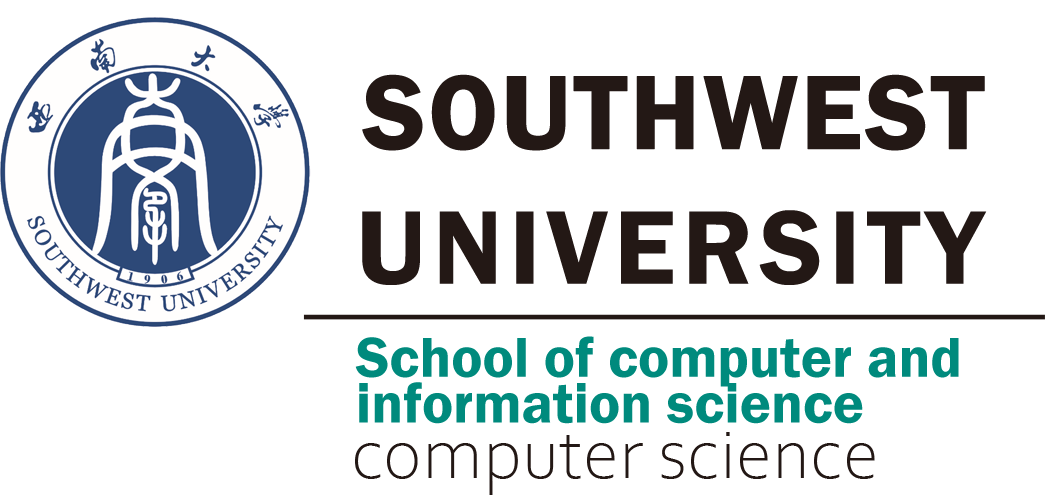
<style>
.page{position:relative;width:1046px;height:496px;background:#ffffff}
.page>*{position:absolute;margin:0}
.t1{font:108.4px "FranklinGothic-Demi";color:#231815;font-weight:bold}
.t2{font:108.4px "FranklinGothic-Demi";letter-spacing:0.06em;color:#231815}
.t3{font:58.3px/45.8px "FranklinGothic-Demi";color:#008a7d}
.t4{font:75px "CorbelLight";color:#231815}
</style>
<div class="page">
<p class="t1" style="left:362px;top:74px;width:623px;height:77px">SOUTHWEST</p>
<p class="t2" style="left:362px;top:210px;width:625px;height:75px">UNIVERSITY</p>
<p class="t3" style="left:355px;top:336px;width:604px;height:88px">School of computer and <br>information science</p>
<p class="t4" style="left:355px;top:432px;width:520px;height:63px">computer science</p>
</div>
